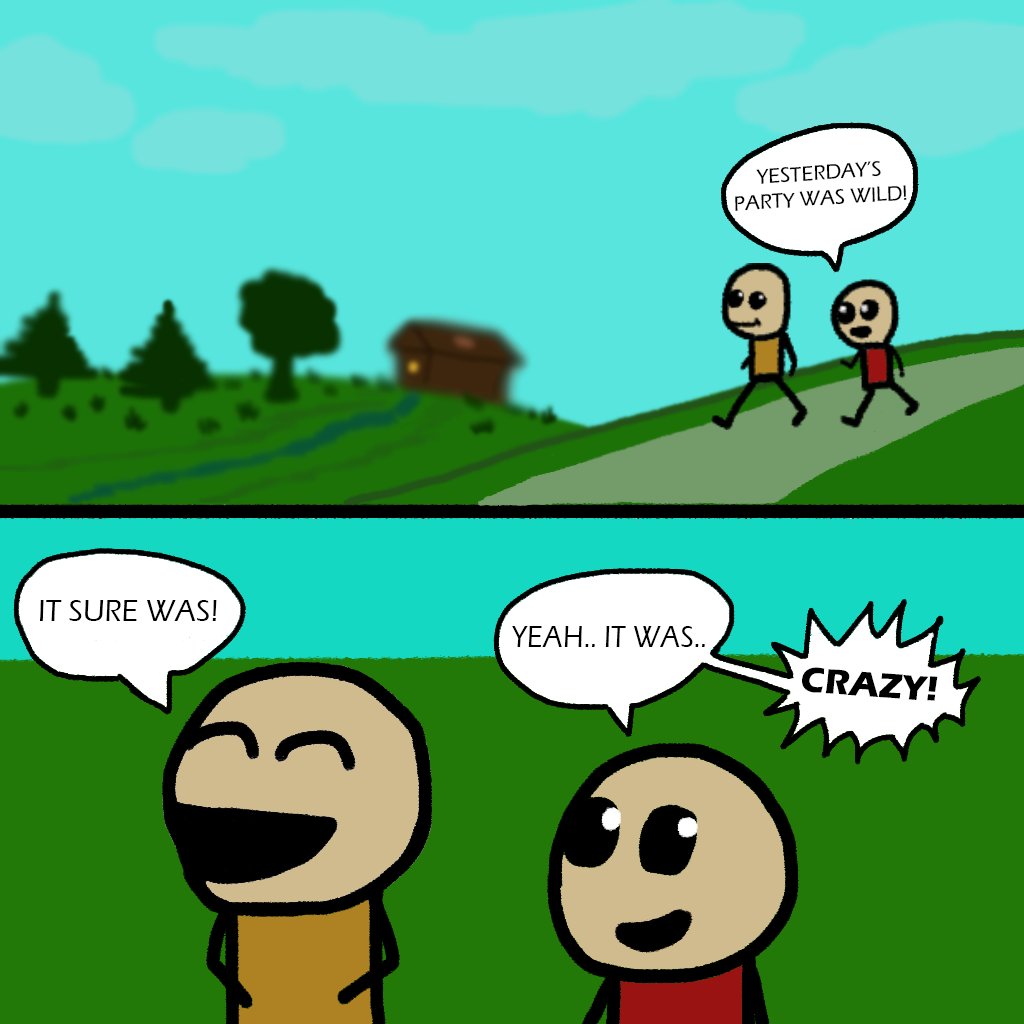
<style>
.page{position:relative;width:1024px;height:1024px;background:#57e5de}
.page>*{position:absolute;margin:0}
.t1{font:21.3px "ErasITC-Medium";color:#000000}
.t2{font:32px "ErasITC-Medium";color:#000000;scale:0.94 1}
.t3{font:31.5px "ErasITC-Medium";color:#000000;scale:0.9 1}
.t4{font:36px "ErasITC-Bold";color:#000000}
</style>
<div class="page">
<p class="t1" style="left:735px;top:161px;width:172px;height:50px;text-align:center;rotate:-4deg">YESTERDAY’S<br>PARTY WAS WILD!</p>
<p class="t2" style="left:40px;top:600px;width:177px;height:21px">IT SURE WAS!</p>
<p class="t3" style="left:512px;top:626px;width:193px;height:21px">YEAH.. IT WAS..</p>
<p class="t4" style="left:802px;top:667px;width:136px;height:34px;rotate:4deg">CRAZY!</p>
</div>
